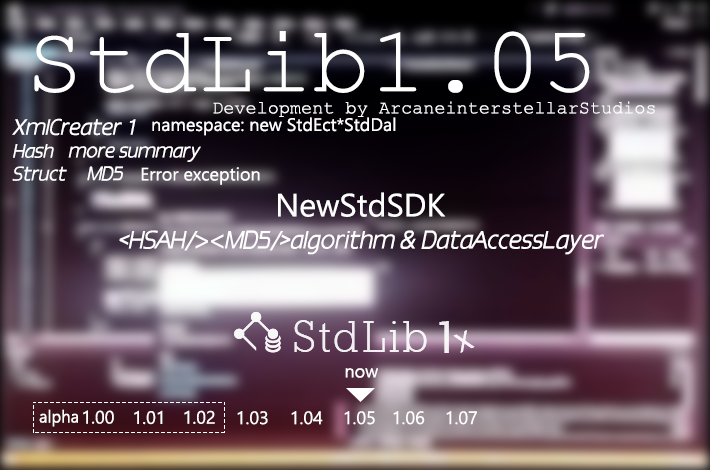
<style>
.page{position:relative;width:710px;height:470px}
.page>*{position:absolute;margin:0}
.t1{font:94.9px "CourierNewPSMT";color:#ffffff}
.t2{font:18.4px "CourierNewPSMT";color:#ffffff}
.t3{font:20.6px "386-CAI978";color:#ffffff}
.t4{font:18px "Gadugi";color:#ffffff}
.t5{font:18px "386-CAI978";color:#ffffff}
.t6{font:32.1px "Gadugi";color:#ffffff}
.t7{font:23.2px "386-CAI978";color:#ffffff}
.t8{font:23.2px "AdobeHeitiStd-Regular";color:#ffffff}
.t9{font:18px "Ebrima";color:#ffffff}
.t10{font:17.1px "Ebrima";color:#ffffff;scale:0.97 1}
</style>
<div class="page">
<p class="t1" style="left:34px;top:31px;width:556px;height:62px">StdLib1.05</p>
<p class="t2" style="left:213px;top:101px;width:442px;height:16px">Development by ArcaneinterstellarStudios</p>
<p class="t3" style="left:12px;top:118px;width:124px;height:18px">XmlCreater 1</p>
<p class="t4" style="left:152px;top:117px;width:244px;height:19px">namespace: new StdEct*StdDal</p>
<p class="t5" style="left:13px;top:144px;width:41px;height:14px">Hash</p>
<p class="t5" style="left:68px;top:146px;width:133px;height:16px">more summary</p>
<p class="t5" style="left:12px;top:166px;width:55px;height:15px">Struct</p>
<p class="t5" style="left:87px;top:166px;width:36px;height:15px">MD5</p>
<p class="t4" style="left:141px;top:167px;width:119px;height:18px">Error exception</p>
<p class="t6" style="left:278px;top:192px;width:168px;height:25px">NewStdSDK</p>
<p class="t7" style="left:119px;top:230px;width:486px;height:25px">&lt;HSAH/<span class="t8">&gt;&lt;</span>MD5/&gt;algorithm &amp; DataAccessLayer</p>
<p class="t9" style="left:345px;top:368px;width:33px;height:10px">now</p>
<p class="t10" style="left:39px;top:409px;width:39px;height:18px">alpha</p>
<p class="t4" style="left:83px;top:410px;width:31px;height:14px">1.00</p>
<p class="t4" style="left:134px;top:410px;width:29px;height:15px">1.01</p>
<p class="t4" style="left:184px;top:410px;width:31px;height:14px">1.02</p>
<p class="t4" style="left:237px;top:411px;width:31px;height:14px">1.03</p>
<p class="t4" style="left:291px;top:411px;width:32px;height:14px">1.04</p>
<p class="t4" style="left:344px;top:411px;width:31px;height:14px">1.05</p>
<p class="t4" style="left:393px;top:411px;width:32px;height:14px">1.06</p>
<p class="t4" style="left:446px;top:411px;width:31px;height:14px">1.07</p>
</div>
